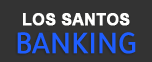
<style>
.page{position:relative;width:152px;height:62px;background:#333333}
.page>*{position:absolute;margin:0}
.t1{font:16px "Arial-BoldMT";color:#fffffe;font-weight:bold}
</style>
<div class="page">
<p class="t1" style="left:23px;top:13px;width:107px;height:13px">LOS SANTOS</p>
</div>
